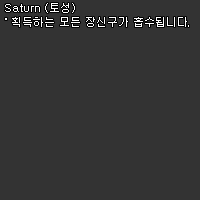
<style>
.page{position:relative;width:200px;height:200px;background:#333333}
.page>*{position:absolute;margin:0}
.t1{font:11px/14px "Dotum";color:#ffffff}
</style>
<div class="page">
<p class="t1" style="left:5px;top:3px;width:184px;height:24px">Saturn (토성)<br>˚ 획득하는 모든 장신구가 흡수됩니다.</p>
</div>
